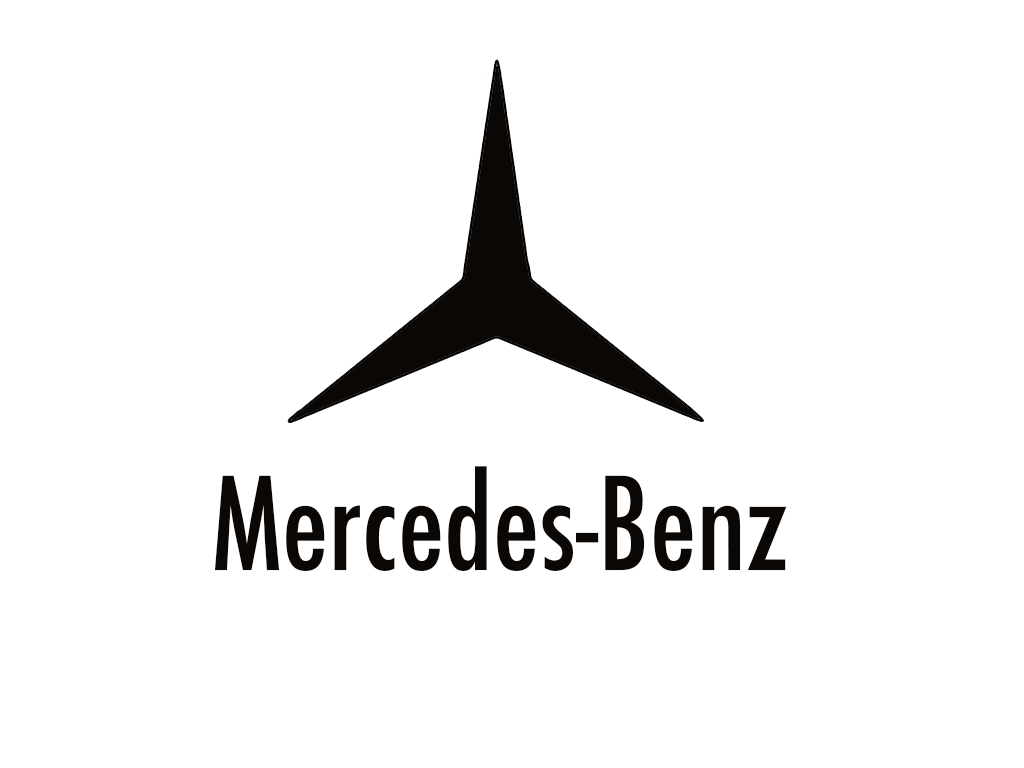
<style>
.page{position:relative;width:1024px;height:768px;background:#ffffff}
.page>*{position:absolute;margin:0}
.t1{font:125px "Futura-CondensedMedium";color:#0b0705}
.t2{font:333.3px "Futura-CondensedMedium";color:#0b0705}
</style>
<div class="page">
<p class="t1" style="left:214px;top:466px;width:573px;height:105px">Mercedes-Benz<br>M<span class="t2">M</span></p>
</div>
